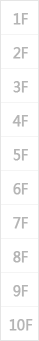
<style>
.page{position:relative;width:39px;height:341px;background:#ffffff}
.page>*{position:absolute;margin:0}
.t1{font:14px "MicrosoftYaHei";color:#b5b5b5;font-weight:bold}
</style>
<div class="page">
<p class="t1" style="left:13px;top:13px;width:15px;height:12px">1F</p>
<p class="t1" style="left:13px;top:47px;width:15px;height:12px">2F</p>
<p class="t1" style="left:13px;top:81px;width:15px;height:12px">3F</p>
<p class="t1" style="left:12px;top:115px;width:16px;height:12px">4F</p>
<p class="t1" style="left:13px;top:149px;width:15px;height:12px">5F</p>
<p class="t1" style="left:13px;top:183px;width:15px;height:12px">6F</p>
<p class="t1" style="left:13px;top:217px;width:15px;height:12px">7F</p>
<p class="t1" style="left:13px;top:251px;width:15px;height:12px">8F</p>
<p class="t1" style="left:13px;top:285px;width:15px;height:12px">9F</p>
<p class="t1" style="left:9px;top:319px;width:24px;height:12px">10F</p>
</div>
